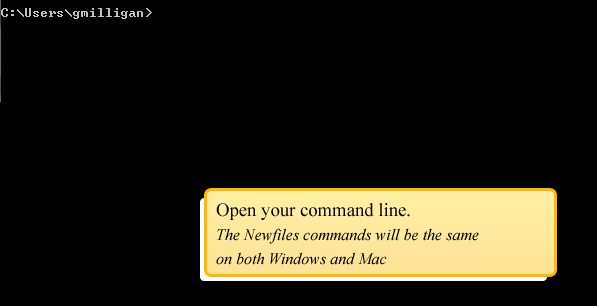
<style>
.page{position:relative;width:597px;height:306px;background:#000000}
.page>*{position:absolute;margin:0}
.t1{font:16px/24px "TimesNewRomanPS-ItalicMT";color:#000000}
.t2{font:18.7px/24px "TimesNewRomanPSMT";color:#000000}
</style>
<div class="page">
<p class="t1" style="left:216px;top:203px;width:263px;height:62px"><span class="t2">Open your command line.<br></span>The Newfiles commands will be the same <br>on both Windows and Mac</p>
</div>
